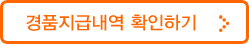
<style>
.page{position:relative;width:249px;height:44px;background:#ffffff}
.page>*{position:absolute;margin:0}
.t1{font:18px "YDIYGO330";color:#ff6600}
</style>
<div class="page">
<p class="t1" style="left:26px;top:14px;width:170px;height:17px">경품지급내역 확인하기</p>
</div>
